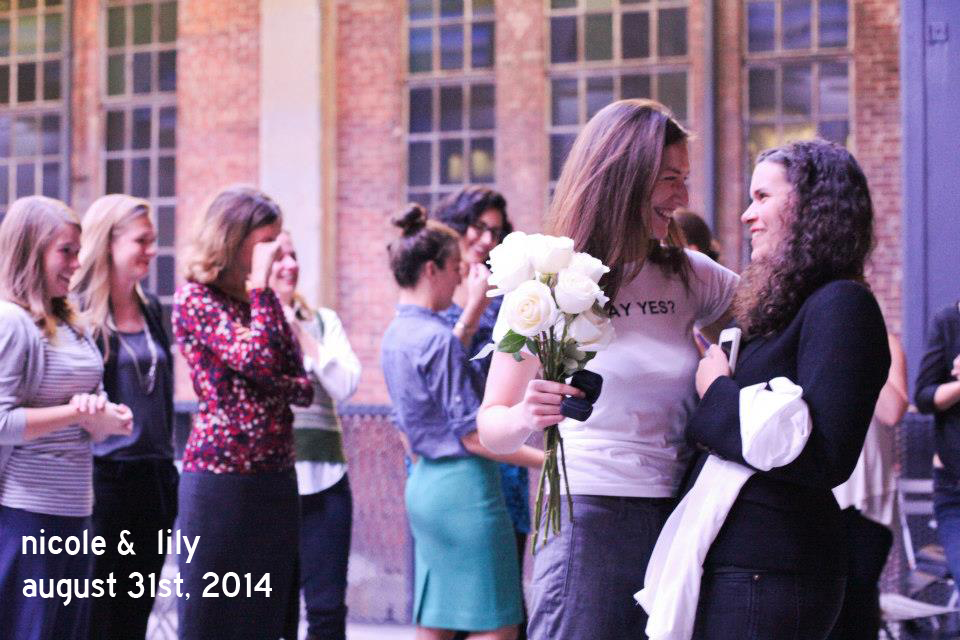
<style>
.page{position:relative;width:960px;height:640px}
.page>*{position:absolute;margin:0}
.t1{font:36px "HighwayGothic";color:#fdfcfc}
</style>
<div class="page">
<p class="t1" style="left:22px;top:529px;width:250px;height:77px">nicole &amp;  lily<br>august 31st, 2014</p>
</div>
